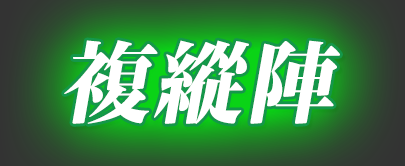
<style>
.page{position:relative;width:405px;height:166px}
.page>*{position:absolute;margin:0}
.t1{font:89px "KochoStd-Heavy";letter-spacing:0.025em;color:#ffffff;font-weight:bold;font-style:italic}
</style>
<div class="page">
<p class="t1" style="left:64px;top:40px;width:276px;height:84px">複縱陣</p>
</div>
